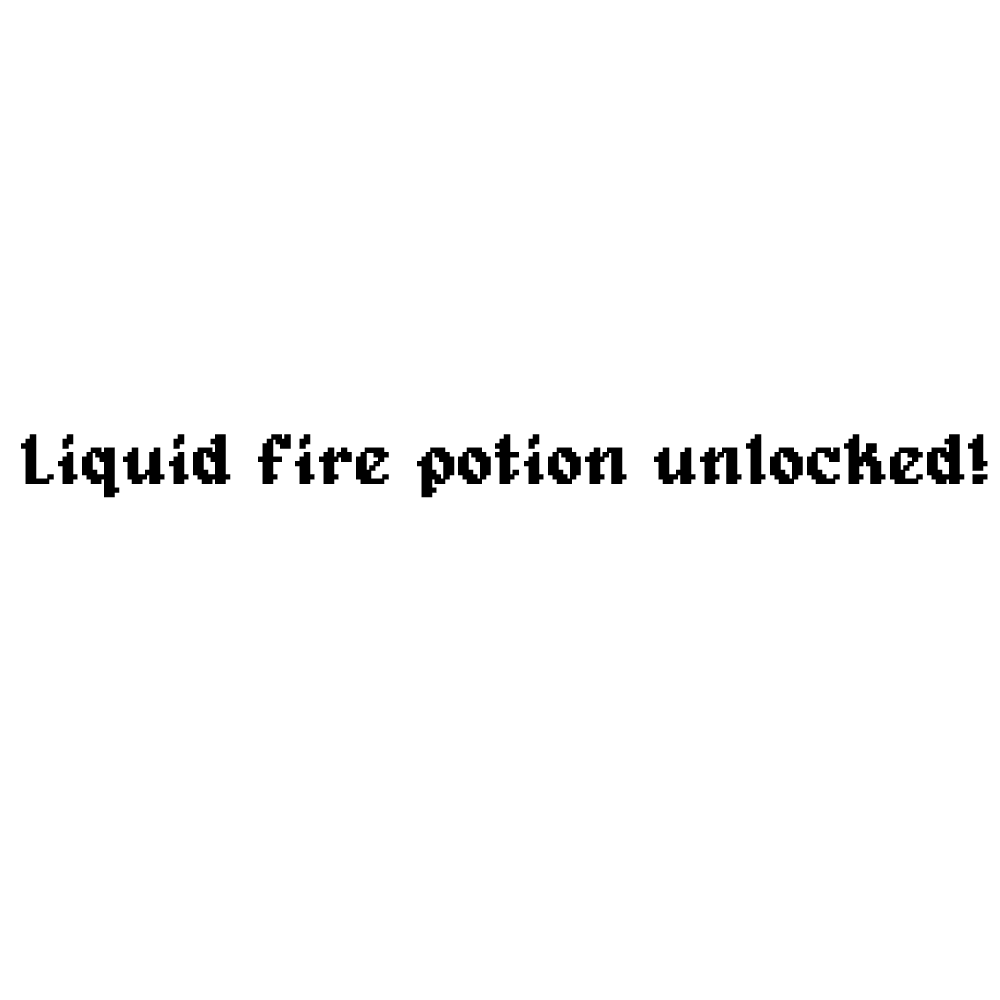
<style>
.page{position:relative;width:1000px;height:1000px;background:#ffffff}
.page>*{position:absolute;margin:0}
.t1{font:70.8px "Alagard";color:#000000;font-weight:bold}
</style>
<div class="page">
<p class="t1" style="left:21px;top:434px;width:967px;height:64px">Liquid fire potion unlocked!</p>
</div>
